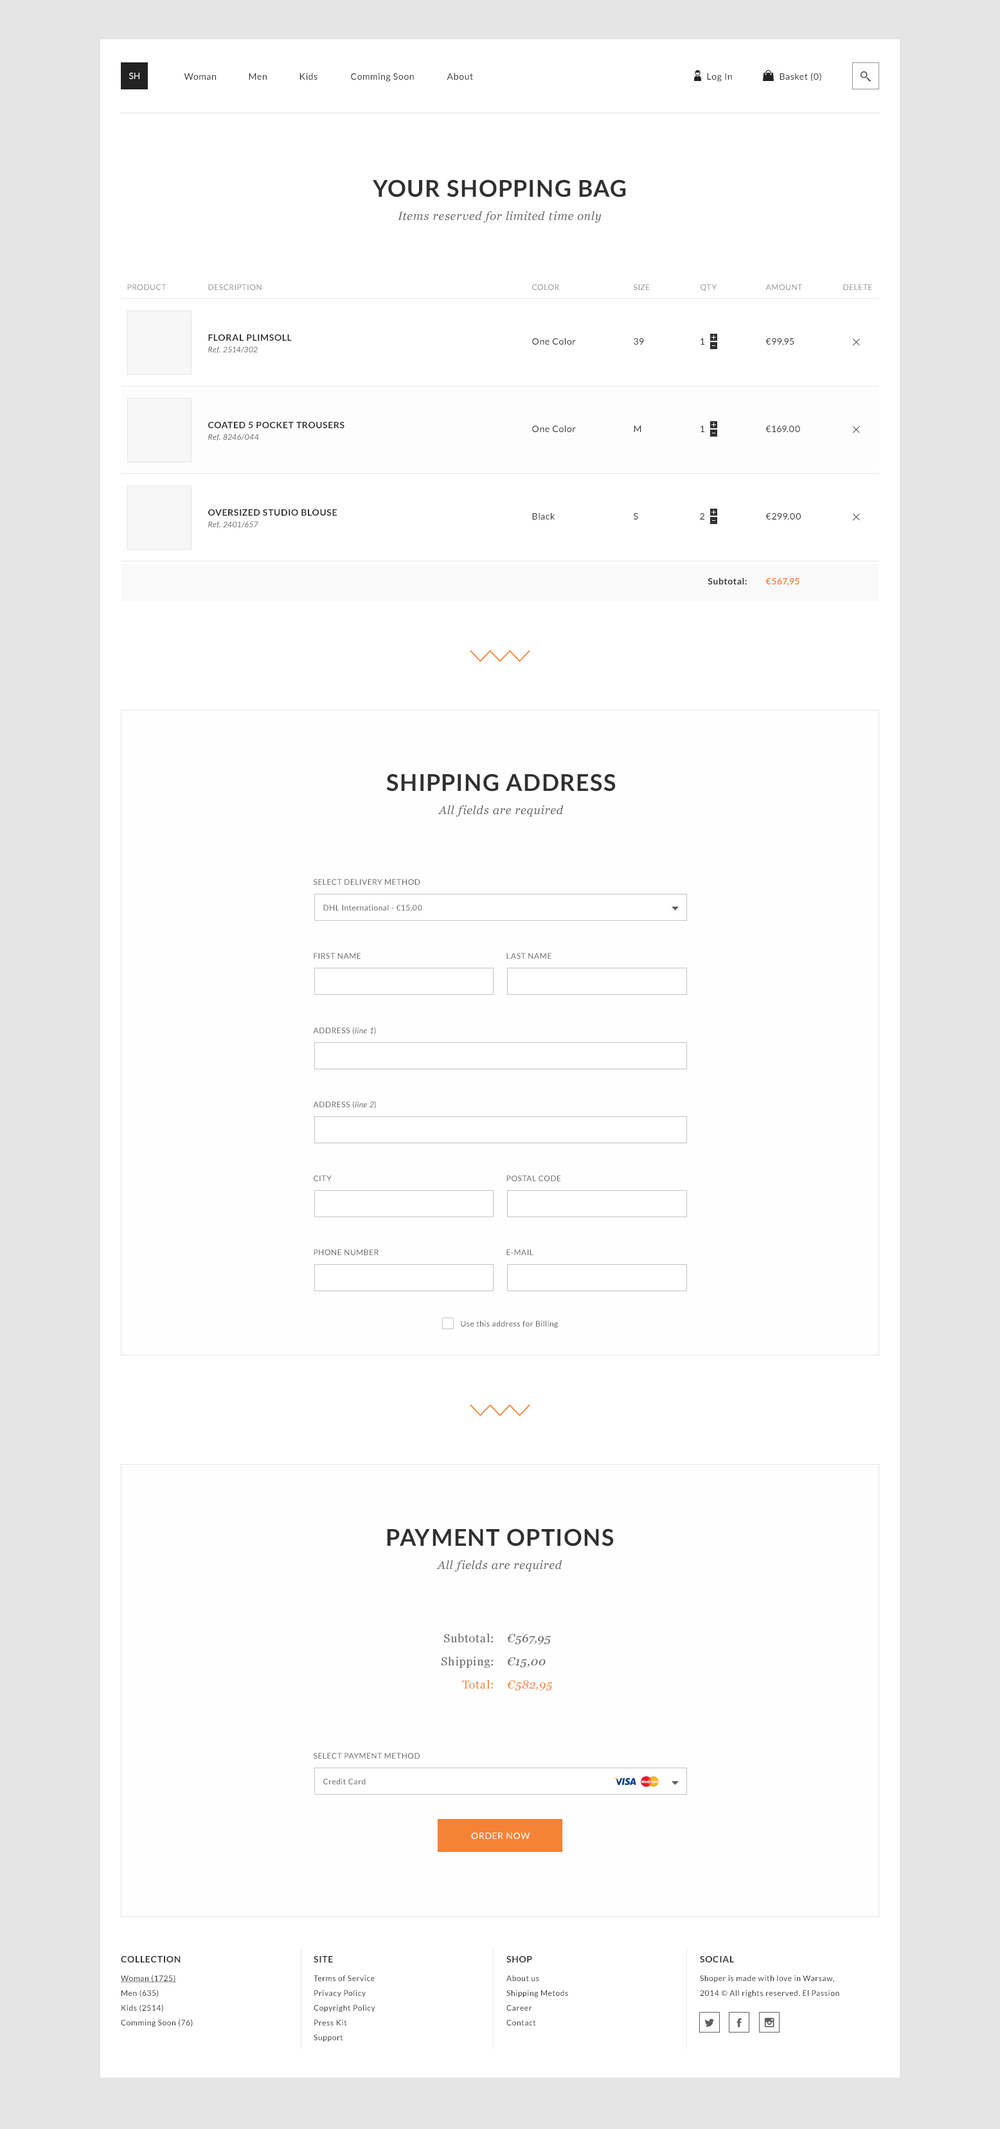
<style>
.page{position:relative;width:1000px;height:2129px;background:#fefefe}
.page>*{position:absolute;margin:0}
.t1{font:9px "Lato-Regular";color:#ffffff;text-transform:uppercase}
.t2{font:9px "Lato-Regular";letter-spacing:0.05em;color:#303030}
.t3{font:11.6px/23.1px "Georgia-Italic";letter-spacing:0.05em;color:#606060}
.t4{font:23.1px/23.1px "Lato-Bold";letter-spacing:0.05em;color:#303030;text-transform:uppercase}
.t5{font:7.7px "Lato-Regular";letter-spacing:0.05em;color:#909090;text-transform:uppercase}
.t6{font:9px/11.6px "Lato-Bold";letter-spacing:0.05em;color:#303030;text-transform:uppercase}
.t7{font:7.7px/11.6px "Lato-Italic";letter-spacing:0.05em;color:#606060}
.t8{font:9px "Lato-Regular";letter-spacing:0.05em;color:#303030;text-transform:uppercase}
.t9{font:19.3px "Lato-Light";letter-spacing:0.05em;color:#303030;text-transform:uppercase}
.t10{font:9px "Lato-Bold";letter-spacing:0.05em;color:#303030}
.t11{font:9px "Lato-Bold";letter-spacing:0.05em;color:#f68236}
.t12{font:7.7px "Lato-Regular";letter-spacing:0.05em;color:#606060;text-transform:uppercase}
.t13{font:7.7px "Lato-Regular";letter-spacing:0.05em;color:#606060}
.t14{font:7.7px "Lato-Italic";letter-spacing:0.05em;color:#606060}
.t15{font:11.6px/23.1px "Georgia";letter-spacing:0.05em;color:#606060}
.t16{font:11.6px/23.1px "Georgia";letter-spacing:0.05em;color:#f68236}
.t17{font:11.6px/23.1px "Georgia-Italic";letter-spacing:0.05em;color:#f68236}
.t18{font:9px "Lato-Regular";letter-spacing:0.05em;color:#ffffff;text-transform:uppercase}
.t19{font:9px "Lato-Bold";letter-spacing:0.05em;color:#303030;text-transform:uppercase}
.t20{font:7.7px/14.8px "Lato-Regular";letter-spacing:0.05em;color:#303030}
.t21{font:7.7px/14.8px "Lato-Regular";letter-spacing:0.05em;color:#303030;text-decoration:underline}
</style>
<div class="page">
<p class="t1" style="left:129px;top:73px;width:11px;height:6px">sh</p>
<p class="t2" style="left:184px;top:73px;width:32px;height:7px">Woman</p>
<p class="t2" style="left:249px;top:73px;width:18px;height:7px">Men</p>
<p class="t2" style="left:300px;top:73px;width:18px;height:7px">Kids</p>
<p class="t2" style="left:351px;top:73px;width:63px;height:9px">Comming Soon</p>
<p class="t2" style="left:447px;top:73px;width:26px;height:7px">About</p>
<p class="t2" style="left:707px;top:73px;width:25px;height:9px">Log In</p>
<p class="t2" style="left:780px;top:73px;width:42px;height:8px">Basket (0)</p>
<p class="t3" style="left:373px;top:179px;width:253px;height:43px;text-align:center"><span class="t4">Your Shopping Bag<br></span>Items reserved for limited time only</p>
<p class="t5" style="left:127px;top:284px;width:40px;height:6px">PRODUCT</p>
<p class="t5" style="left:208px;top:284px;width:54px;height:6px">DESCRIPTION</p>
<p class="t5" style="left:532px;top:284px;width:28px;height:6px">color</p>
<p class="t5" style="left:634px;top:284px;width:16px;height:6px">SIZE</p>
<p class="t5" style="left:701px;top:284px;width:16px;height:7px">QTY</p>
<p class="t5" style="left:766px;top:284px;width:36px;height:6px">AMOUNT</p>
<p class="t5" style="left:843px;top:284px;width:29px;height:6px">DELETE</p>
<p class="t6" style="left:208px;top:334px;width:84px;height:20px">FLORAL PLIMSOLL<br><span class="t7">Ref. 2514/302</span></p>
<p class="t2" style="left:532px;top:338px;width:44px;height:7px">One Color</p>
<p class="t8" style="left:634px;top:338px;width:10px;height:7px">39</p>
<p class="t8" style="left:701px;top:338px;width:4px;height:7px">1</p>
<p class="t8" style="left:766px;top:338px;width:29px;height:8px">€99,95</p>
<p class="t9" style="left:852px;top:338px;width:8px;height:8px;rotate:45deg">+</p>
<p class="t6" style="left:208px;top:422px;width:137px;height:19px">COATED 5 POCKET TROUSERS<br><span class="t7">Ref. 8246/044</span></p>
<p class="t2" style="left:532px;top:425px;width:44px;height:7px">One Color</p>
<p class="t8" style="left:634px;top:426px;width:8px;height:6px">M</p>
<p class="t8" style="left:701px;top:426px;width:4px;height:6px">1</p>
<p class="t8" style="left:766px;top:426px;width:34px;height:6px">€169.00</p>
<p class="t9" style="left:852px;top:426px;width:8px;height:7px;rotate:45deg">+</p>
<p class="t6" style="left:208px;top:509px;width:129px;height:19px">OVERSIZED STUDIO BLOUSE<br><span class="t7">Ref. 2401/657</span></p>
<p class="t2" style="left:532px;top:512px;width:23px;height:7px">Black</p>
<p class="t8" style="left:634px;top:513px;width:4px;height:6px">S</p>
<p class="t8" style="left:700px;top:513px;width:5px;height:6px">2</p>
<p class="t8" style="left:766px;top:513px;width:35px;height:6px">€299.00</p>
<p class="t9" style="left:852px;top:513px;width:8px;height:8px;rotate:45deg">+</p>
<p class="t10" style="left:708px;top:577px;width:39px;height:7px">Subtotal:</p>
<p class="t11" style="left:766px;top:578px;width:34px;height:8px">€567,95</p>
<p class="t3" style="left:386px;top:773px;width:230px;height:43px;text-align:center"><span class="t4">Shipping address<br></span>All fields are required</p>
<p class="t12" style="left:314px;top:879px;width:106px;height:6px">Select delivery method</p>
<p class="t13" style="left:323px;top:905px;width:99px;height:7px">DHL International - €15,00</p>
<p class="t12" style="left:314px;top:953px;width:47px;height:6px">FIRST NAME</p>
<p class="t12" style="left:507px;top:953px;width:45px;height:6px">last name</p>
<p class="t12" style="left:313px;top:1027px;width:63px;height:7px">Address (<span class="t14">line 1</span>)</p>
<p class="t12" style="left:313px;top:1101px;width:63px;height:7px">Address (<span class="t14">line 2</span>)</p>
<p class="t12" style="left:314px;top:1175px;width:18px;height:6px">city</p>
<p class="t12" style="left:507px;top:1175px;width:54px;height:6px">postal code</p>
<p class="t12" style="left:314px;top:1249px;width:65px;height:6px">Phone number</p>
<p class="t12" style="left:507px;top:1249px;width:27px;height:6px">e-mail</p>
<p class="t13" style="left:461px;top:1320px;width:97px;height:8px">Use this address for Billing</p>
<p class="t3" style="left:387px;top:1528px;width:227px;height:43px;text-align:center"><span class="t4">Payment options<br></span>All fields are required</p>
<p class="t15" style="left:442px;top:1633px;width:51px;height:56px;text-align:right">Subtotal:<br>Shipping:<br><span class="t16">Total:</span></p>
<p class="t3" style="left:507px;top:1634px;width:46px;height:57px">€567,95<br>€15,00<br><span class="t17">€582,95</span></p>
<p class="t12" style="left:314px;top:1752px;width:106px;height:6px">Select payment method</p>
<p class="t13" style="left:323px;top:1778px;width:43px;height:6px">Credit Card</p>
<p class="t18" style="left:471px;top:1832px;width:59px;height:7px">order now</p>
<p class="t19" style="left:121px;top:1956px;width:60px;height:6px">Collection</p>
<p class="t19" style="left:314px;top:1956px;width:19px;height:6px">site</p>
<p class="t19" style="left:507px;top:1956px;width:25px;height:6px">Shop</p>
<p class="t19" style="left:700px;top:1956px;width:34px;height:6px">social</p>
<p class="t20" style="left:120px;top:1974px;width:73px;height:52px"><span class="t21">Woman (1725)<br></span>Men (635)<br>Kids (2514)<br>Comming Soon (76)</p>
<p class="t20" style="left:314px;top:1975px;width:61px;height:66px">Terms of Service <br>Privacy Policy <br>Copyright Policy <br>Press Kit <br>Support</p>
<p class="t20" style="left:507px;top:1975px;width:61px;height:50px">About us<br>Shipping Metods<br>Career<br>Contact</p>
<p class="t20" style="left:700px;top:1975px;width:140px;height:22px">Shoper is made with love in Warsaw, <br>2014 © All rights reserved. El Passion</p>
</div>
